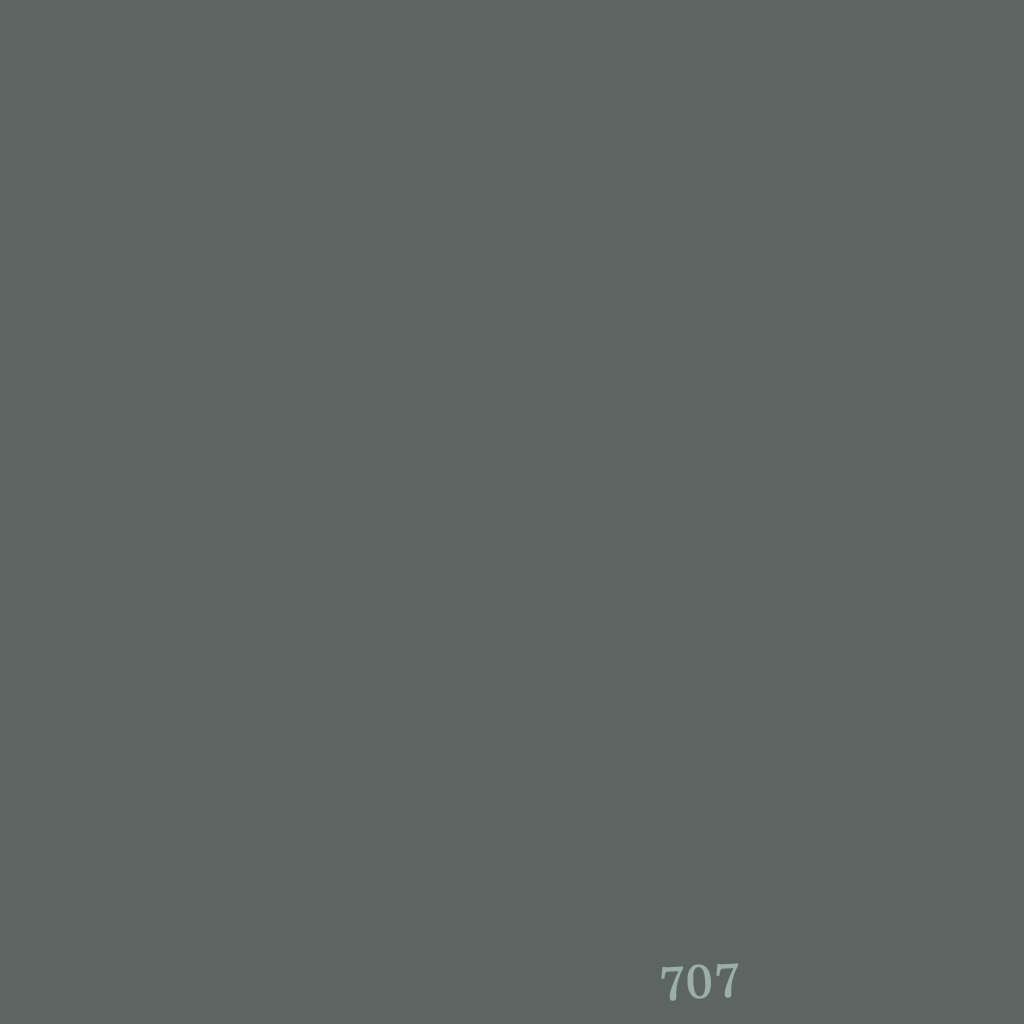
<style>
.page{position:relative;width:1024px;height:1024px;background:#5d6563}
.page>*{position:absolute;margin:0}
.t1{font:47.6px "Century";letter-spacing:-0.005em;color:#9baea9;font-weight:bold}
</style>
<div class="page">
<p class="t1" style="left:661px;top:963px;width:78px;height:38px;rotate:-3deg">707</p>
</div>
